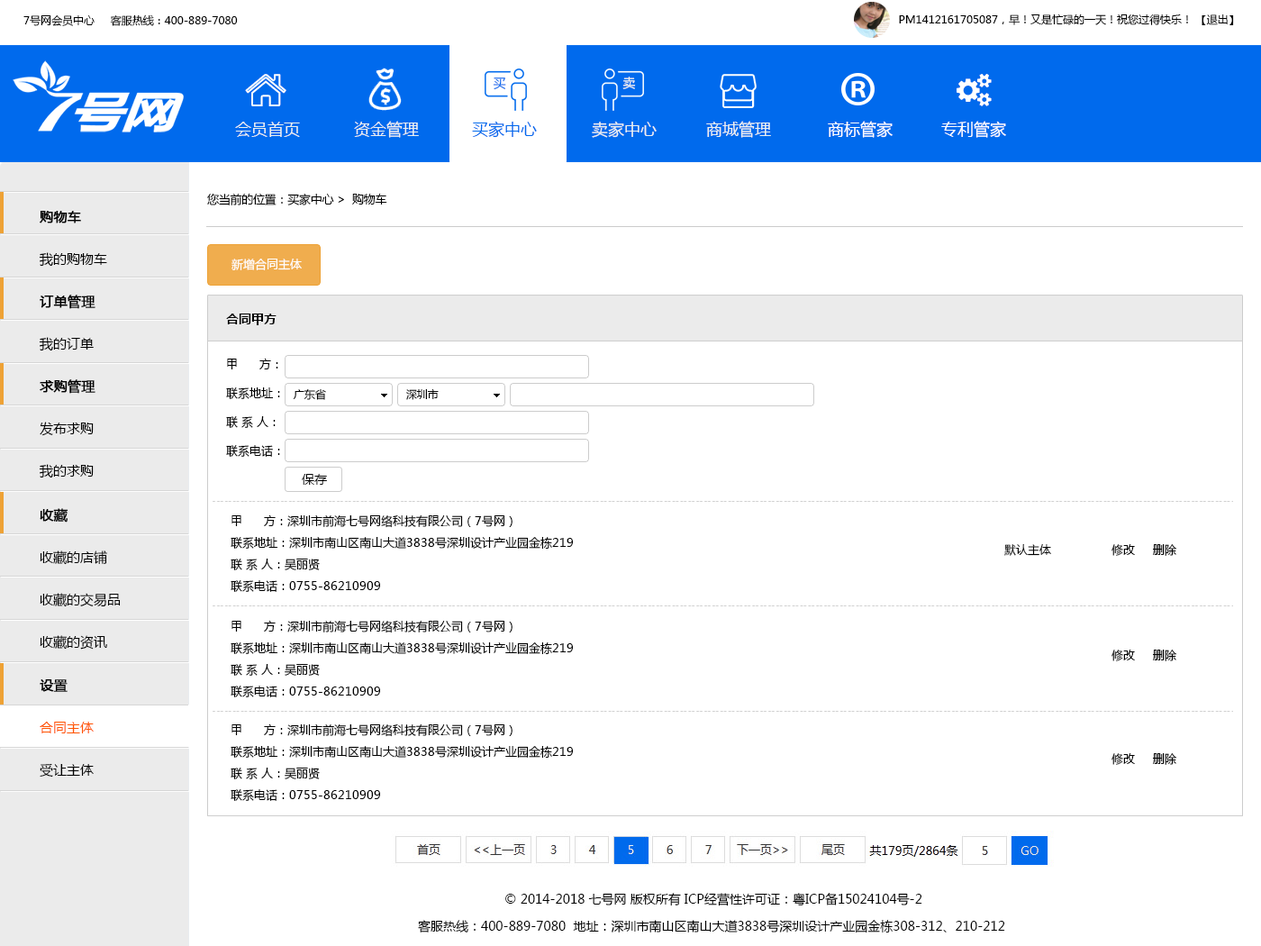
<style>
.page{position:relative;width:1261px;height:946px;background:#ffffff}
.page>*{position:absolute;margin:0}
.t1{font:10.8px "MicrosoftYaHei";color:#000000}
.t2{font:12.6px "MicrosoftYaHei";color:#006aed}
.t3{font:12.6px "MicrosoftYaHei";color:#ecf0f1}
.t4{font:16.2px "MicrosoftYaHei";color:#ecf0f1}
.t5{font:16.2px "MicrosoftYaHei";color:#006aed}
.t6{font:16.2px "MicrosoftYaHei";color:#ffffff}
.t7{font:11.7px "MicrosoftYaHei";letter-spacing:-0.02em;color:#000000}
.t8{font:13.5px/42.3px "MicrosoftYaHei";color:#000000}
.t9{font:13.5px/42.3px "MicrosoftYaHei";color:#000000;font-weight:bold}
.t10{font:11.7px "MicrosoftYaHei";color:#ffffff}
.t11{font:12.6px "MicrosoftYaHei-Bold";color:#000000}
.t12{font:11.7px/28.8px "MicrosoftYaHei";color:#000000}
.t13{font:12.6px "MicrosoftYaHei";color:#000000}
.t14{font:11.7px/21.6px "MicrosoftYaHei";color:#000000}
.t15{font:11.7px "MicrosoftYaHei";color:#000000}
.t16{font:13.5px/42.3px "MicrosoftYaHei";color:#ff5400}
.t17{font:12.6px/27px "MicrosoftYaHei";color:#000000}
</style>
<div class="page">
<p class="t1" style="left:23px;top:14px;width:215px;height:12px">7号网会员中心     客服热线：400-889-7080</p>
<p class="t1" style="left:899px;top:14px;width:335px;height:11px">PM1412161705087，早！又是忙碌的一天！祝您过得快乐！ 【退出】</p>
<p class="t2" style="left:493px;top:77px;width:13px;height:13px">买</p>
<p class="t3" style="left:622px;top:77px;width:14px;height:12px">卖</p>
<p class="t4" style="left:235px;top:122px;width:65px;height:15px">会员首页</p>
<p class="t4" style="left:354px;top:121px;width:65px;height:17px">资金管理</p>
<p class="t5" style="left:472px;top:121px;width:65px;height:17px">买家中心</p>
<p class="t4" style="left:592px;top:121px;width:65px;height:17px">卖家中心</p>
<p class="t4" style="left:706px;top:121px;width:65px;height:17px">商城管理</p>
<p class="t6" style="left:828px;top:121px;width:65px;height:17px">商标管家</p>
<p class="t6" style="left:941px;top:121px;width:65px;height:17px">专利管家</p>
<p class="t7" style="left:207px;top:193px;width:180px;height:12px">您当前的位置：买家中心 &gt;  购物车</p>
<p class="t8" style="left:39px;top:211px;width:68px;height:56px"><span class="t9">购物车<br></span>我的购物车</p>
<p class="t10" style="left:231px;top:258px;width:71px;height:12px">新增合同主体</p>
<p class="t9" style="left:39px;top:295px;width:56px;height:56px">订单管理<br><span class="t8">我的订单</span></p>
<p class="t11" style="left:226px;top:313px;width:51px;height:12px">合同甲方</p>
<p class="t12" style="left:226px;top:358px;width:54px;height:99px">甲      方：<br>联系地址：<br>联 系 人：<br>联系电话：</p>
<p class="t8" style="left:39px;top:379px;width:56px;height:99px"><span class="t9">求购管理<br></span>发布求购<br>我的求购</p>
<p class="t1" style="left:293px;top:388px;width:33px;height:12px">广东省</p>
<p class="t1" style="left:406px;top:389px;width:33px;height:11px">深圳市</p>
<p class="t13" style="left:302px;top:474px;width:25px;height:11px">保存</p>
<p class="t8" style="left:40px;top:508px;width:81px;height:141px"><span class="t9">收藏<br></span>收藏的店铺<br>收藏的交易品<br>收藏的资讯</p>
<p class="t14" style="left:231px;top:514px;width:342px;height:78px">甲      方：深圳市前海七号网络科技有限公司（7号网）<br>联系地址：深圳市南山区南山大道3838号深圳设计产业园金栋219<br>联 系 人：吴丽贤<br>联系电话：0755-86210909</p>
<p class="t15" style="left:1004px;top:544px;width:47px;height:12px">默认主体</p>
<p class="t15" style="left:1111px;top:544px;width:65px;height:12px">修改     删除</p>
<p class="t14" style="left:231px;top:620px;width:342px;height:77px">甲      方：深圳市前海七号网络科技有限公司（7号网）<br>联系地址：深圳市南山区南山大道3838号深圳设计产业园金栋219<br>联 系 人：吴丽贤<br>联系电话：0755-86210909</p>
<p class="t15" style="left:1111px;top:649px;width:65px;height:12px">修改     删除</p>
<p class="t16" style="left:40px;top:679px;width:54px;height:98px"><span class="t9">设置<br></span>合同主体<br><span class="t8">受让主体</span></p>
<p class="t14" style="left:231px;top:723px;width:342px;height:78px">甲      方：深圳市前海七号网络科技有限公司（7号网）<br>联系地址：深圳市南山区南山大道3838号深圳设计产业园金栋219<br>联 系 人：吴丽贤<br>联系电话：0755-86210909</p>
<p class="t15" style="left:1111px;top:753px;width:65px;height:12px">修改     删除</p>
<p class="t17" style="left:418px;top:893px;width:587px;height:40px;text-align:center">© 2014-2018 七号网 版权所有 ICP经营性许可证：粤ICP备15024104号-2<br>客服热线：400-889-7080  地址：深圳市南山区南山大道3838号深圳设计产业园金栋308-312、210-212</p>
</div>
